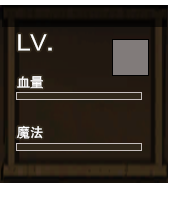
<style>
.page{position:relative;width:173px;height:199px}
.page>*{position:absolute;margin:0}
.t1{font:21.8px "FZHTJW--GB1-0";letter-spacing:-0.025em;color:#ffffff;scale:1.17 1}
.t2{font:13.4px "FZHTJW--GB1-0";letter-spacing:-0.025em;color:#ffffff}
</style>
<div class="page">
<p class="t1" style="left:18px;top:34px;width:34px;height:17px">LV.</p>
<p class="t2" style="left:17px;top:76px;width:26px;height:13px">血量</p>
<p class="t2" style="left:16px;top:125px;width:27px;height:14px">魔法</p>
</div>
